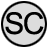
<style>
.page{position:relative;width:48px;height:48px;background:#dcdcdc}
.page>*{position:absolute;margin:0}
.t1{font:30px "ArialMT";letter-spacing:-0.05em;color:#000000}
</style>
<div class="page">
<p class="t1" style="left:5px;top:12px;width:39px;height:23px">SC</p>
</div>
